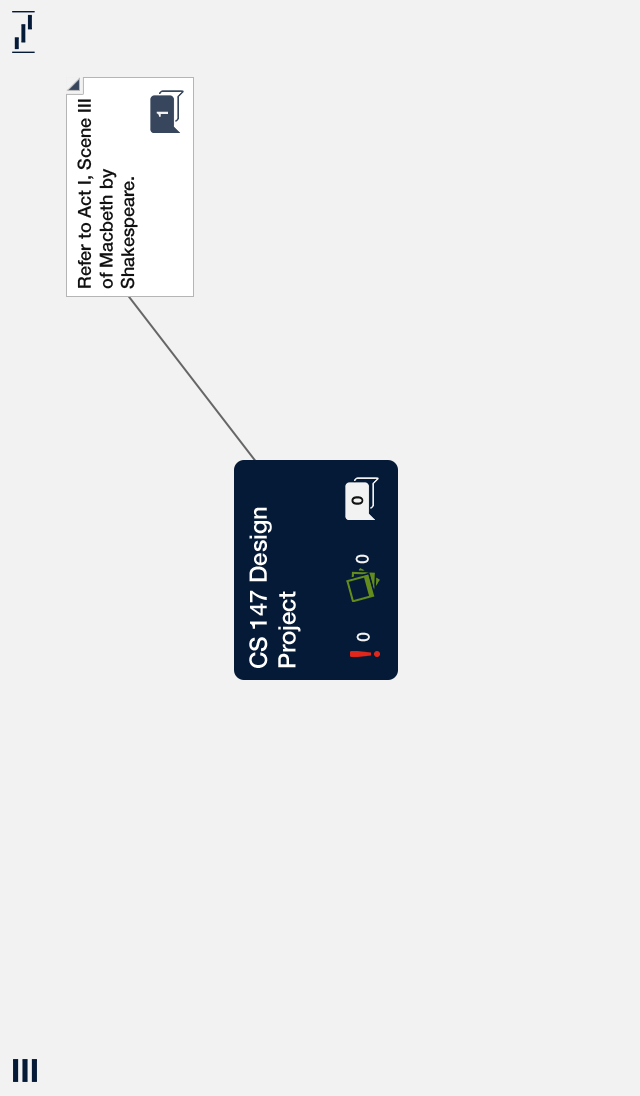
<style>
.page{position:relative;width:640px;height:1096px;background:#f2f2f2}
.page>*{position:absolute;margin:0}
.t1{font:18px "HelveticaNeue-Medium";color:#111111}
.t2{font:16px "HelveticaNeue-Bold";color:#f2f2f2}
.t3{font:16px "HelveticaNeue-Bold";color:#111111}
.t4{font:24px "HelveticaNeue-Medium";color:#ffffff}
.t5{font:18px "HelveticaNeue-Medium";color:#f2f2f2}
</style>
<div class="page">
<p class="t1" style="left:77px;top:99px;width:61px;height:190px;rotate:-90deg">Refer to Act I, Scene III of Macbeth by Shakespeare.</p>
<p class="t2" style="left:156px;top:111px;width:12px;height:6px;rotate:-90deg">1</p>
<p class="t3" style="left:351px;top:496px;width:13px;height:9px;rotate:-90deg">0</p>
<p class="t4" style="left:249px;top:507px;width:52px;height:161px;rotate:-90deg">CS 147 Design Project</p>
<p class="t5" style="left:355px;top:554px;width:14px;height:10px;rotate:-90deg">0</p>
<p class="t5" style="left:356px;top:632px;width:14px;height:10px;rotate:-90deg">0</p>
</div>
